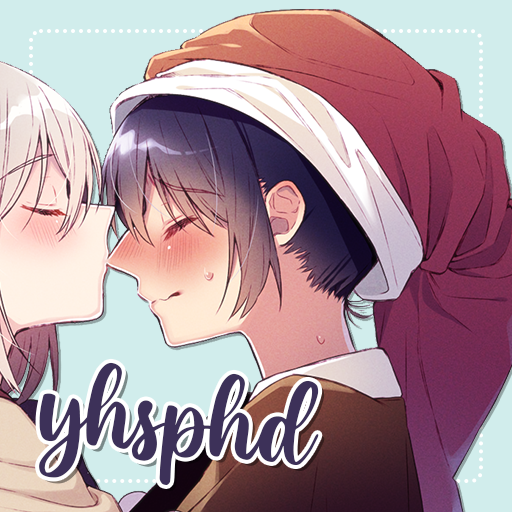
<style>
.page{position:relative;width:512px;height:512px}
.page>*{position:absolute;margin:0}
.t1{font:120px "HelloValentica-Regular";color:#3d3159}
</style>
<div class="page">
<p class="t1" style="left:39px;top:362px;width:280px;height:123px;rotate:5deg">yhsphd</p>
</div>
